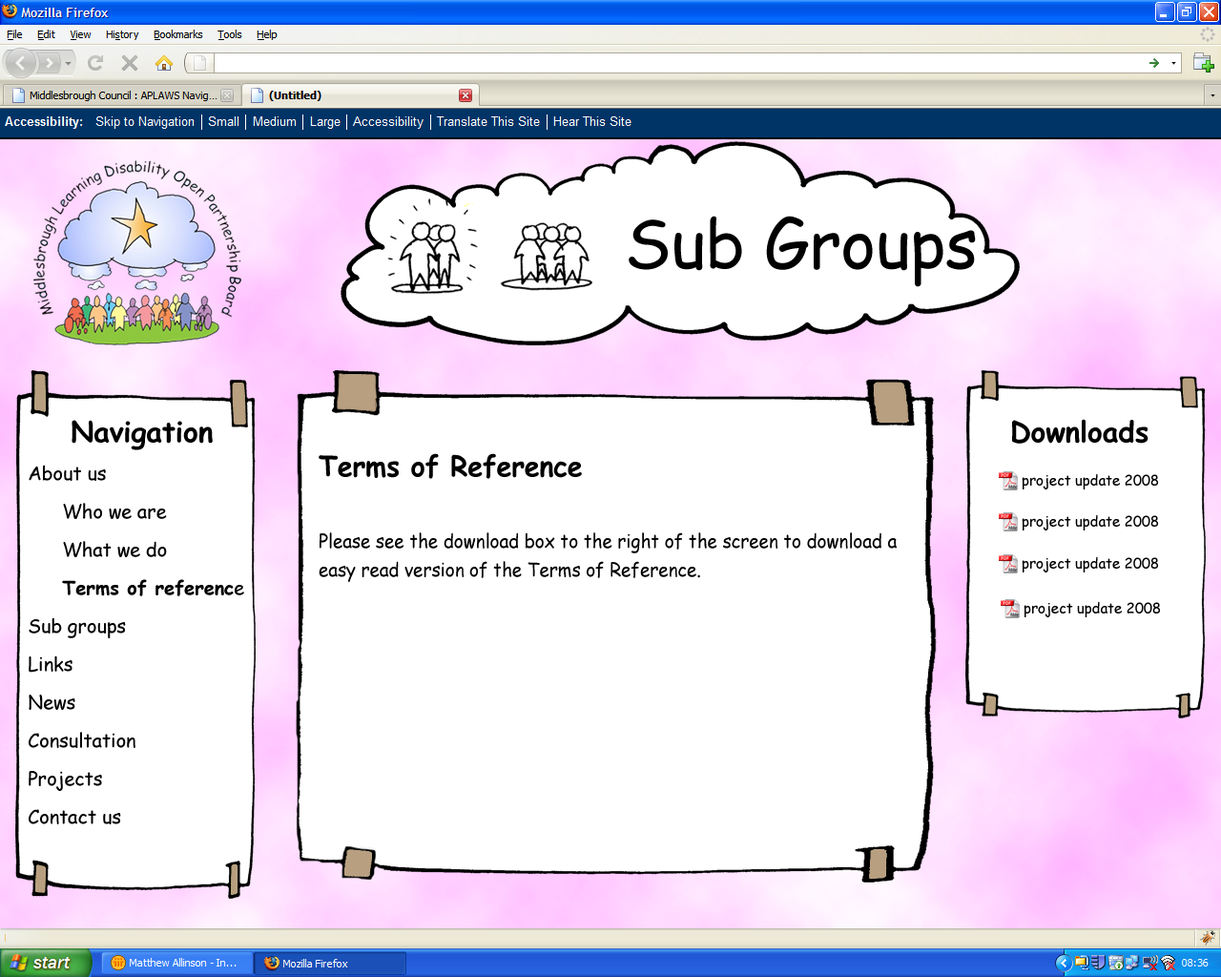
<style>
.page{position:relative;width:1221px;height:977px;background:#ffffff}
.page>*{position:absolute;margin:0}
.t1{font:66.8px "ComicSansMS";letter-spacing:-0.005em;color:#000000}
.t2{font:19.1px/38.2px "ComicSansMS";letter-spacing:-0.005em;color:#000000}
.t3{font:28.6px/38.2px "ComicSansMS-Bold";letter-spacing:-0.005em;color:#000000}
.t4{font:19.1px/38.2px "ComicSansMS-Bold";letter-spacing:-0.005em;color:#000000}
.t5{font:28.6px "ComicSansMS-Bold";letter-spacing:-0.005em;color:#000000}
.t6{font:19.1px/28.6px "ComicSansMS";letter-spacing:-0.005em;color:#000000;scale:0.95 1}
.t7{font:28.6px/14.3px "ComicSansMS-Bold";letter-spacing:-0.005em;color:#000000;scale:0.95 1}
</style>
<div class="page">
<p class="t1" style="left:629px;top:216px;width:347px;height:71px">Sub Groups</p>
<p class="t2" style="left:29px;top:420px;width:215px;height:404px;text-align:center"><span class="t3">Navigation<br></span>About us<br> Who we are<br> What we do<br> <span class="t4">Terms of referenc</span>e<br>Sub groups<br>Links<br>News<br>Consultation<br>Projects<br>Contact us</p>
<p class="t5" style="left:1012px;top:419px;width:136px;height:25px">Downloads</p>
<p class="t6" style="left:319px;top:453px;width:578px;height:129px"><span class="t7">Terms of Reference<br><br></span><br>Please see the download box to the right of the screen to download a easy read version of the Terms of Reference.</p>
</div>
